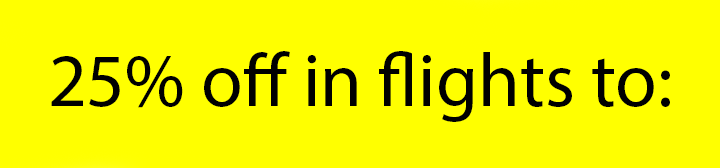
<style>
.page{position:relative;width:720px;height:168px;background:#ffff00}
.page>*{position:absolute;margin:0}
.t1{font:75.6px "MyriadPro-Regular";color:#000000}
</style>
<div class="page">
<p class="t1" style="left:51px;top:51px;width:619px;height:71px">25% off in flights to:</p>
</div>
